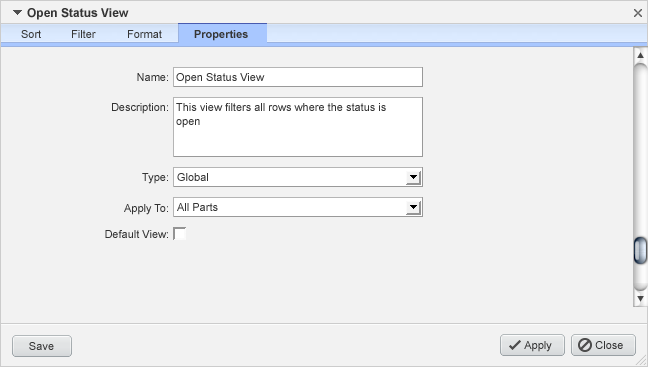
<style>
.page{position:relative;width:648px;height:367px;background:#f2f2f2}
.page>*{position:absolute;margin:0}
.t1{font:12px "Arial-BoldMT";color:#333333}
.t2{font:11px "ArialMT";color:#363636}
.t3{font:11px "Arial-BoldMT";color:#363636}
.t4{font:11px "ArialMT";color:#333333}
.t5{font:11px/14px "ArialMT";color:#333333}
.t6{font:11px "ArialMT";letter-spacing:0.005em;color:#333333}
</style>
<div class="page">
<p class="t1" style="left:27px;top:8px;width:102px;height:12px">Open Status View</p>
<p class="t2" style="left:21px;top:30px;width:20px;height:8px">Sort</p>
<p class="t2" style="left:72px;top:30px;width:24px;height:8px">Filter</p>
<p class="t2" style="left:128px;top:30px;width:34px;height:8px">Format</p>
<p class="t3" style="left:194px;top:30px;width:54px;height:11px">Properties</p>
<p class="t4" style="left:137px;top:73px;width:31px;height:8px">Name:</p>
<p class="t4" style="left:176px;top:73px;width:89px;height:11px">Open Status View</p>
<p class="t4" style="left:112px;top:103px;width:56px;height:11px">Description:</p>
<p class="t5" style="left:176px;top:103px;width:210px;height:25px">This view filters all rows where the status is<br>open</p>
<p class="t4" style="left:142px;top:173px;width:26px;height:11px">Type:</p>
<p class="t4" style="left:177px;top:173px;width:31px;height:8px">Global</p>
<p class="t4" style="left:124px;top:204px;width:44px;height:11px">Apply To:</p>
<p class="t4" style="left:177px;top:203px;width:41px;height:8px">All Parts</p>
<p class="t4" style="left:105px;top:230px;width:63px;height:8px">Default View:</p>
<p class="t6" style="left:29px;top:342px;width:25px;height:8px">Save</p>
<p class="t4" style="left:524px;top:341px;width:28px;height:11px">Apply</p>
<p class="t4" style="left:595px;top:341px;width:28px;height:8px">Close</p>
</div>
